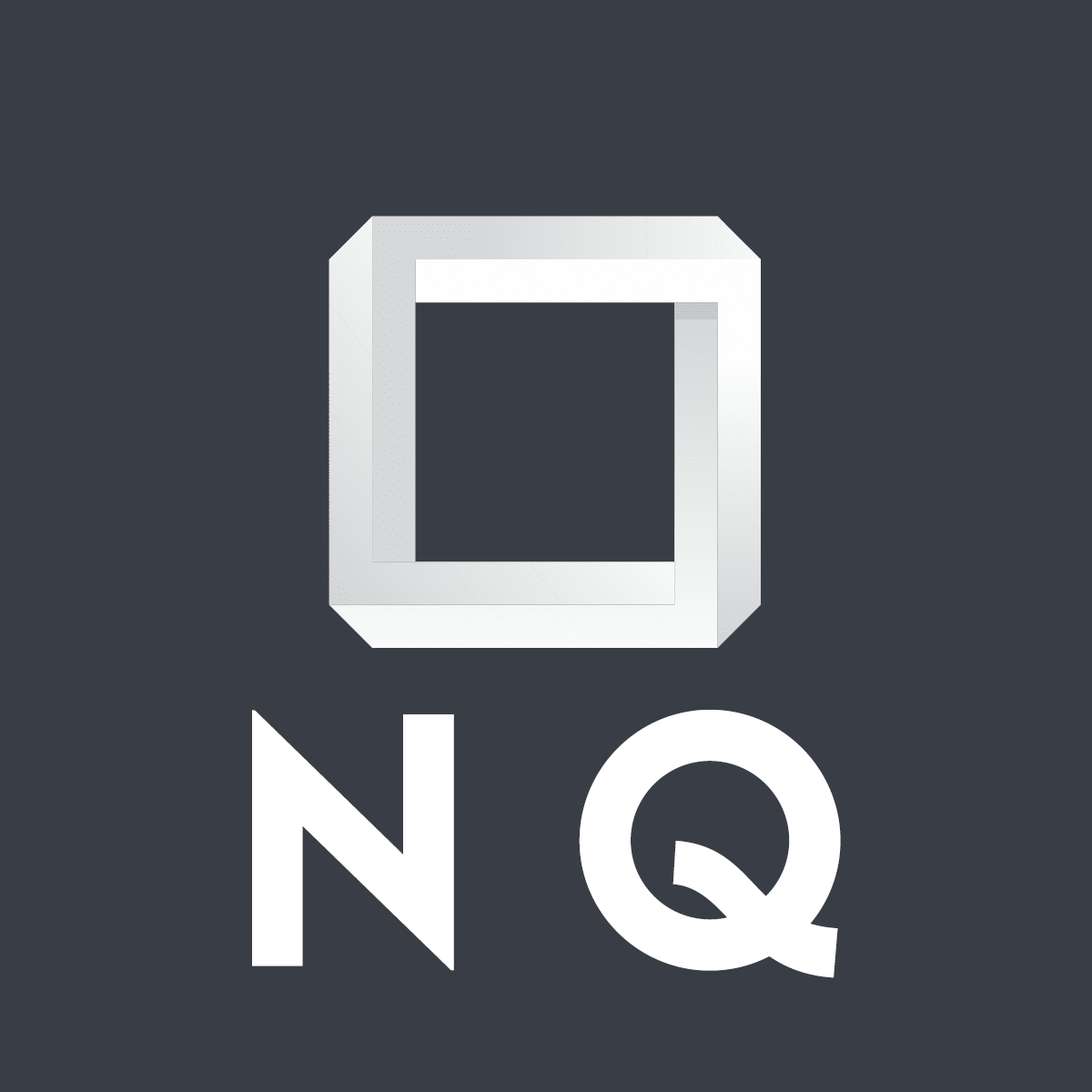
<style>
.page{position:relative;width:1092px;height:1092px;background:#393e46}
.page>*{position:absolute;margin:0}
.t1{font:318.5px "LEMONMILK-Medium";color:#ffffff}
</style>
<div class="page">
<p class="t1" style="left:252px;top:710px;width:589px;height:268px">N Q</p>
</div>
